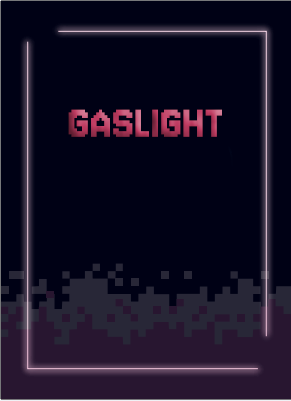
<style>
.page{position:relative;width:291px;height:401px;background:#000115}
.page>*{position:absolute;margin:0}
.t1{font:50px "Jersey10-Regular";letter-spacing:0.025em}
</style>
<div class="page">
<p class="t1" style="left:68px;top:109px;width:154px;height:28px">GASLIGHT</p>
</div>
